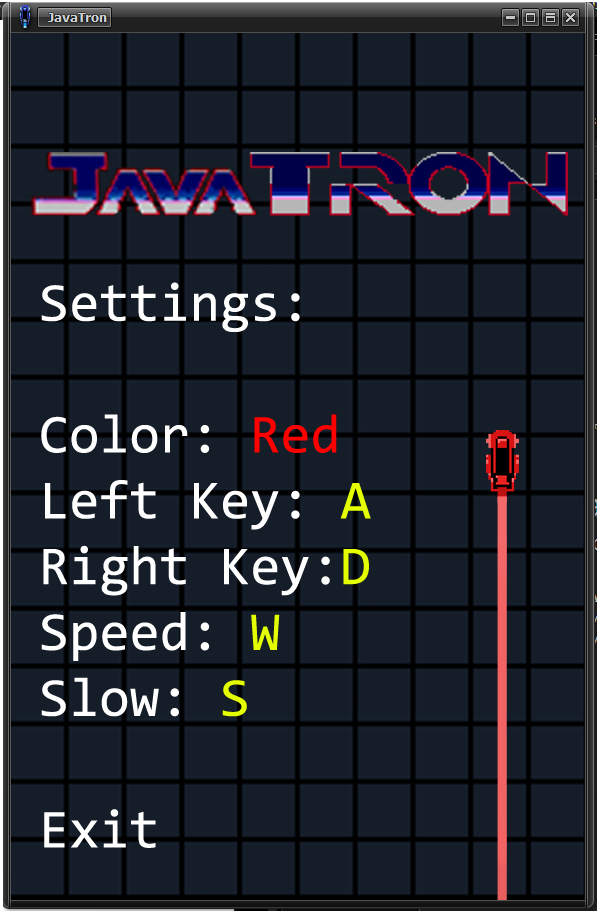
<style>
.page{position:relative;width:600px;height:919px;background:#141d28}
.page>*{position:absolute;margin:0}
.t1{font:54.9px "Consolas";color:#ffffff}
.t2{font:54.9px "Consolas";color:#ff0000}
.t3{font:54.9px "Consolas";color:#e4ff00}
</style>
<div class="page">
<p class="t1" style="left:41px;top:282px;width:330px;height:566px">Settings:<br><br>Color: <span class="t2">Red<br></span>Left Key: <span class="t3">A<br></span>Right Key:<span class="t3">D<br></span>Speed:<span class="t3"> W<br></span>Slow: <span class="t3">S<br></span><br>Exit</p>
</div>
